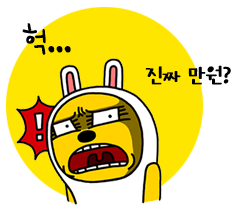
<style>
.page{position:relative;width:234px;height:215px;background:#ffffff}
.page>*{position:absolute;margin:0}
.t1{font:42px "THEHongchaNemo";letter-spacing:-0.05em;color:#000000;font-weight:bold}
.t2{font:22.4px "TypoHeartpoundingM";letter-spacing:-0.05em;color:#000000;font-weight:bold}
</style>
<div class="page">
<p class="t1" style="left:22px;top:23px;width:49px;height:32px">헉...</p>
<p class="t2" style="left:145px;top:65px;width:86px;height:20px">진짜 만원?</p>
</div>
